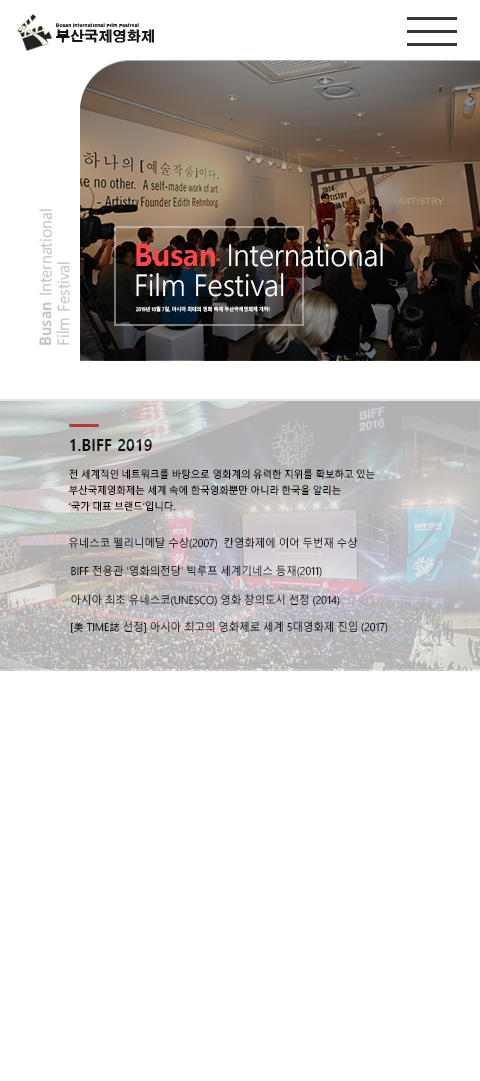
<style>
.page{position:relative;width:480px;height:1081px;background:#ffffff}
.page>*{position:absolute;margin:0}
.t1{font:16px/18px "MalgunGothic";color:#c5c5c5;scale:0.96 1}
.t2{font:16px/18px "MalgunGothicBold";color:#c5c5c5;scale:0.96 1}
.t3{font:30px/30px "MalgunGothic-Semilight";color:#ffffff;scale:0.96 1}
.t4{font:30px/30px "MalgunGothicBold";color:#ff4646;scale:0.96 1}
.t5{font:5px "MalgunGothic-Semilight";color:#f9f4f4;scale:0.95 1}
.t6{font:16px "MalgunGothicBold";color:#000000;scale:0.95 1}
.t7{font:10px/16px "MalgunGothic-Semilight";color:#000000;scale:0.95 1}
.t8{font:11px "MalgunGothic-Semilight";scale:0.95 1}
.t9{font:11px "Gulim";scale:0.95 1}
</style>
<div class="page">
<p class="t1" style="left:39px;top:209px;width:31px;height:136px;rotate:-90deg"><span class="t2">Busan</span> International <br>Film Festival</p>
<p class="t3" style="left:136px;top:243px;width:247px;height:54px"><span class="t4">Busan </span>International <br>Film Festival</p>
<p class="t5" style="left:136px;top:306px;width:134px;height:6px">2019년 10월 7일, 아시아 최대의 영화 축제 부산국제영화제 개막!</p>
<p class="t6" style="left:70px;top:439px;width:82px;height:12px">1.BIFF 2019</p>
<p class="t7" style="left:69px;top:469px;width:306px;height:43px">전 세계적인 네트워크를 바탕으로 영화계의 유력한 지위를 확보하고 있는 <br>부산국제영화제는 세계 속에 한국영화뿐만 아니라 한국을 알리는 <br>‘국가 대표 브랜드’입니다.</p>
<p class="t8" style="left:68px;top:537px;width:290px;height:12px">유네스코 펠리니메달 수상(2007)  칸영화제에 이어 두번재 수상</p>
<p class="t8" style="left:71px;top:565px;width:251px;height:12px">BIFF 전용관 '영화의전당' 빅루프 세계기네스 등재(2011)</p>
<p class="t8" style="left:71px;top:594px;width:269px;height:12px">아시아 최초 유네스코(UNESCO) 영화 창의도시 선정 (2014)</p>
<p class="t8" style="left:71px;top:621px;width:317px;height:12px">[<span class="t9">美</span> TIME<span class="t9">誌</span> 선정] 아시아 최고의 영화제로 세계 5대영화제 진입 (2017)</p>
</div>
